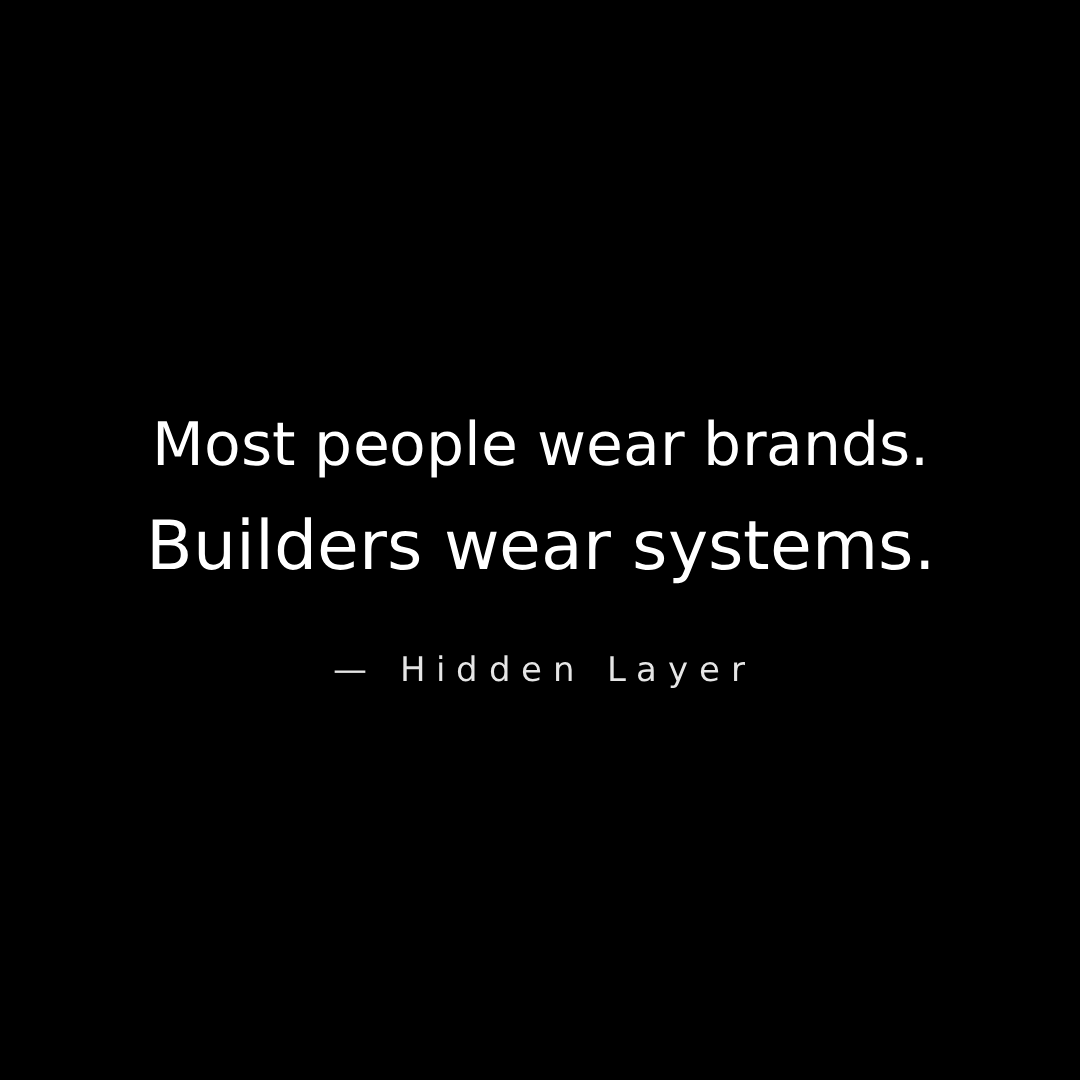
<style>
.page{position:relative;width:1080px;height:1080px;background:#000000}
.page>*{position:absolute;margin:0}
.t1{font:60px "DejaVuSans";color:#ffffff}
.t2{font:68px "DejaVuSans";color:#ffffff}
.t3{font:34px "DejaVuSans";color:#e6e6e6}
</style>
<div class="page">
<p class="t1" style="left:157px;top:419px;width:766px;height:59px">Most people wear brands.</p>
<p class="t2" style="left:152px;top:517px;width:777px;height:67px">Builders wear systems.</p>
<p class="t3" style="left:334px;top:655px;width:411px;height:34px">—   H i d d e n   L a y e r</p>
</div>
